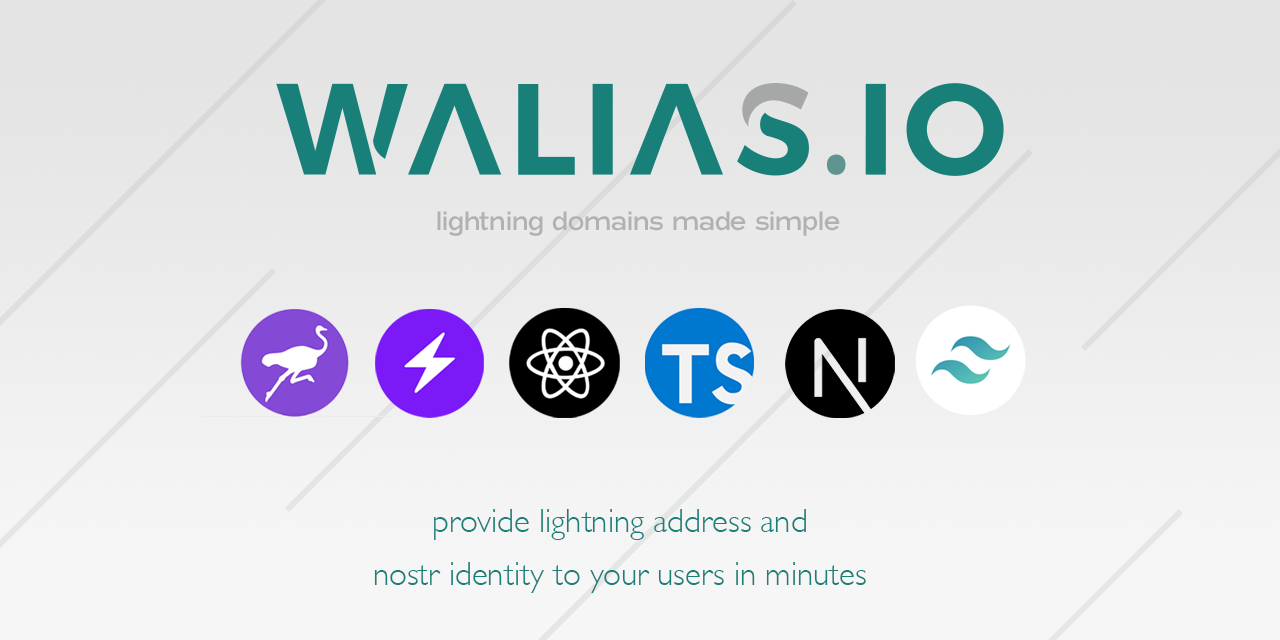
<style>
.page{position:relative;width:1280px;height:640px}
.page>*{position:absolute;margin:0}
.t1{font:28.8px "BlatantRegular";color:#b1b1b1}
.t2{font:33px/53px "GillSans-Light";color:#197f79}
</style>
<div class="page">
<p class="t1" style="left:437px;top:211px;width:403px;height:25px">lightning domains made simple</p>
<p class="t2" style="left:374px;top:509px;width:492px;height:84px;text-align:center">provide lightning address and<br>nostr identity to your users in minutes</p>
</div>
